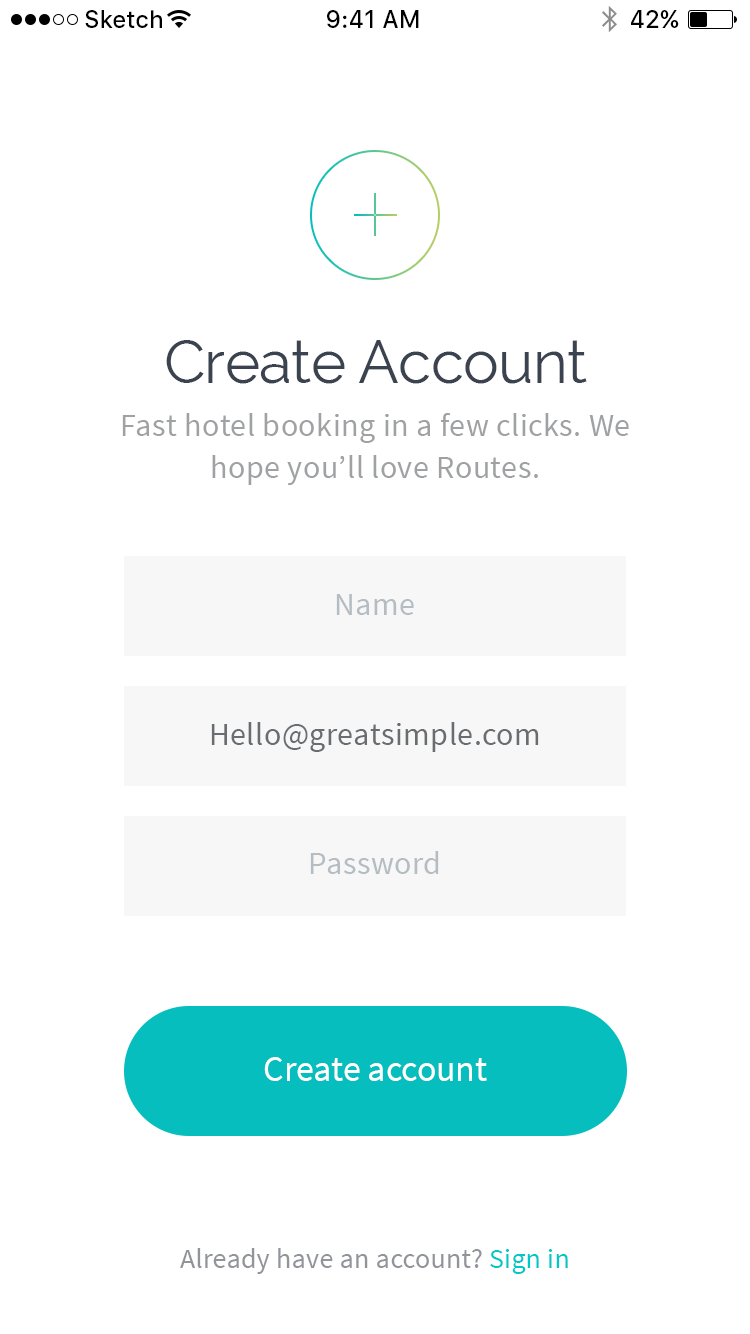
<style>
.page{position:relative;width:750px;height:1334px;background:#ffffff}
.page>*{position:absolute;margin:0}
.t1{font:24px "SFUIText-Medium";color:#000000}
.t2{font:60px "Raleway";letter-spacing:-0.01em;color:#3c4350}
.t3{font:32px/42px "SourceSansPro-Regular";letter-spacing:0.015em;color:#9fa1a2}
.t4{font:32px "SourceSansPro-Regular";letter-spacing:0.015em;color:#b3bdc2}
.t5{font:32px "SourceSansPro-Regular";letter-spacing:0.015em;color:#696d6f}
.t6{font:36px "SourceSansPro-Regular";letter-spacing:-0.005em;color:#ffffff}
.t7{font:28px "SourceSansPro-Regular";letter-spacing:0.01em;color:#919499}
.t8{font:28px "SourceSansPro-Regular";letter-spacing:0.01em;color:#00c8c9}
</style>
<div class="page">
<p class="t1" style="left:85px;top:10px;width:77px;height:18px">Sketch</p>
<p class="t1" style="left:327px;top:10px;width:92px;height:18px">9:41 AM</p>
<p class="t1" style="left:631px;top:10px;width:48px;height:18px">42%</p>
<p class="t2" style="left:166px;top:340px;width:421px;height:44px">Create Account</p>
<p class="t3" style="left:122px;top:413px;width:507px;height:72px;text-align:center">Fast hotel booking in a few clicks. We hope you’ll love Routes.</p>
<p class="t4" style="left:336px;top:594px;width:78px;height:21px">Name</p>
<p class="t5" style="left:211px;top:722px;width:328px;height:30px">Hello@greatsimple.com</p>
<p class="t4" style="left:310px;top:851px;width:129px;height:23px">Password</p>
<p class="t6" style="left:264px;top:1057px;width:223px;height:24px">Create account</p>
<p class="t7" style="left:180px;top:1248px;width:388px;height:26px">Already have an account? <span class="t8">Sign in</span></p>
</div>
